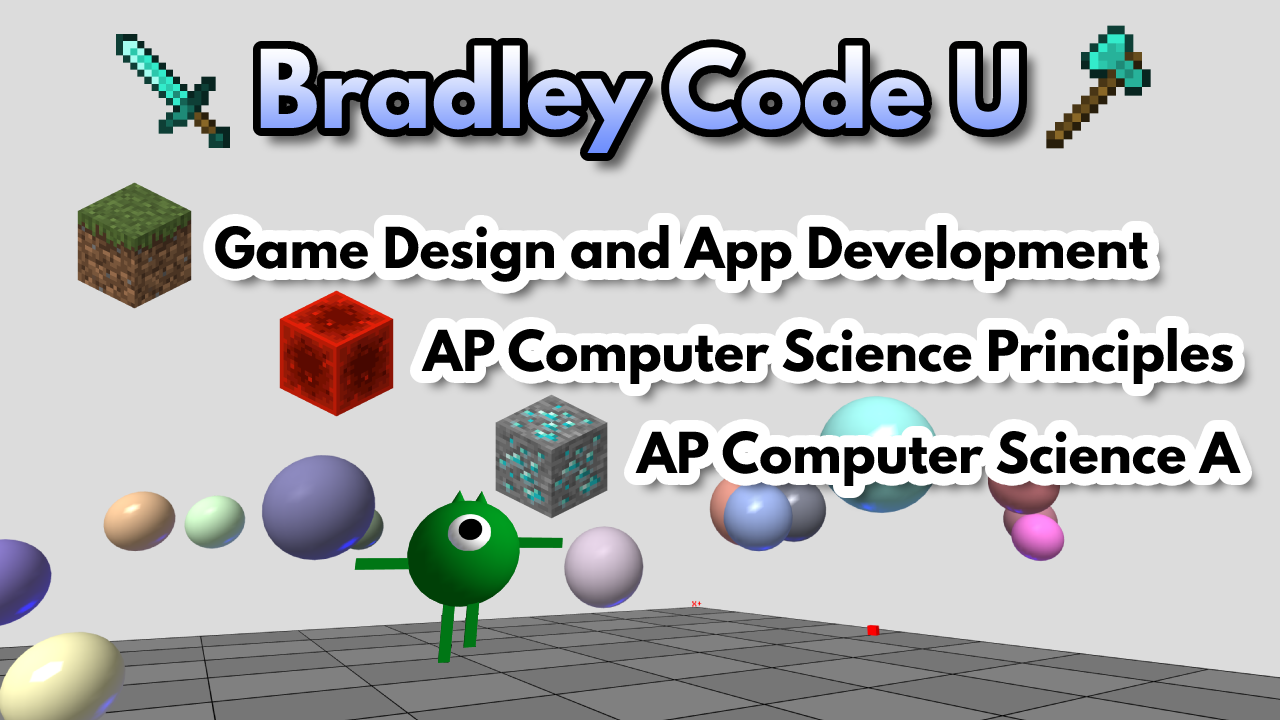
<style>
.page{position:relative;width:1280px;height:720px;background:#dcdcdc}
.page>*{position:absolute;margin:0}
.t1{font:96px "LeagueSpartan-Bold"}
.t2{font:50px "LeagueSpartan-Bold";color:#000000}
</style>
<div class="page">
<p class="t1" style="left:260px;top:45px;width:759px;height:108px">Bradley Code U</p>
<p class="t2" style="left:215px;top:225px;width:934px;height:57px">Game Design and App Development</p>
<p class="t2" style="left:421px;top:328px;width:812px;height:56px">AP Computer Science Principles</p>
<p class="t2" style="left:635px;top:431px;width:606px;height:55px">AP Computer Science A</p>
</div>
